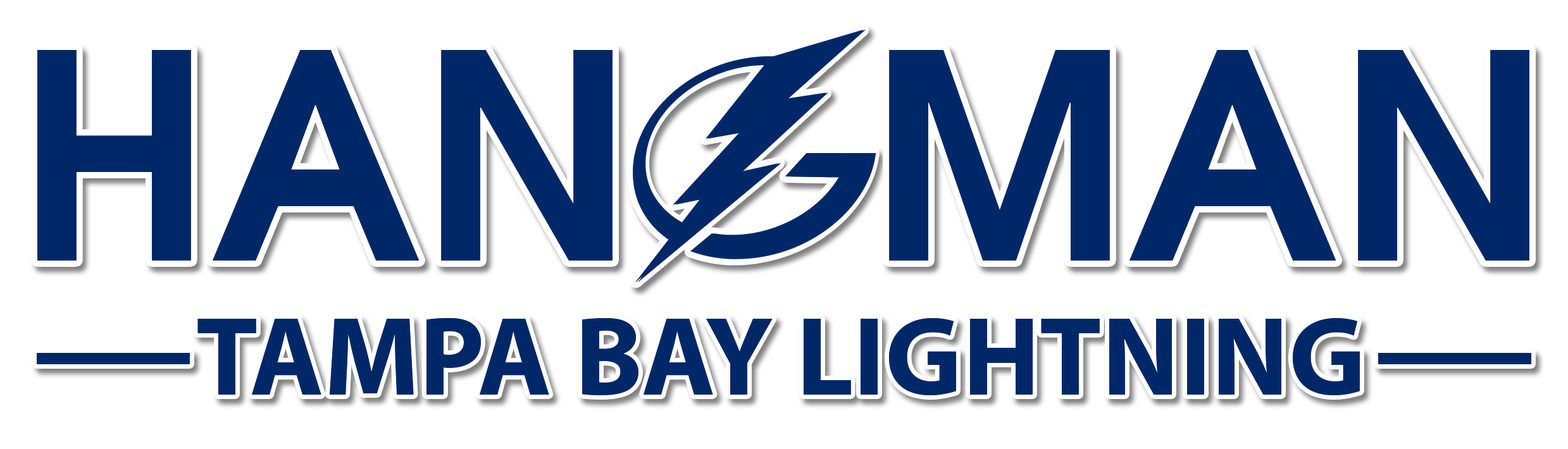
<style>
.page{position:relative;width:1568px;height:449px;background:#ffffff}
.page>*{position:absolute;margin:0}
.t1{font:284.7px "AvantGarde-Demi";color:#002868}
.t2{font:112.6px "MyriadPro-Bold";color:#002868}
</style>
<div class="page">
<p class="t1" style="left:37px;top:46px;width:1492px;height:219px">HANGMAN</p>
<p class="t1" style="left:37px;top:46px;width:1492px;height:219px">HANGMAN</p>
<p class="t2" style="left:197px;top:318px;width:1163px;height:78px">TAMPA BAY LIGHTNING</p>
<p class="t2" style="left:197px;top:318px;width:1163px;height:78px">TAMPA BAY LIGHTNING</p>
</div>
